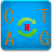
<style>
.page{position:relative;width:52px;height:52px}
.page>*{position:absolute;margin:0}
.t1{font:20.7px "SimHei";letter-spacing:-0.22em;color:#ae7a28;text-transform:uppercase}
.t2{font:10.3px "SimHei";letter-spacing:-0.22em;color:#ee0011;text-transform:uppercase}
</style>
<div class="page">
<p class="t1" style="left:4px;top:9px;width:45px;height:14px">C     T</p>
<p class="t2" style="left:24px;top:24px;width:6px;height:7px">M</p>
<p class="t1" style="left:4px;top:31px;width:45px;height:14px">A     G</p>
</div>
